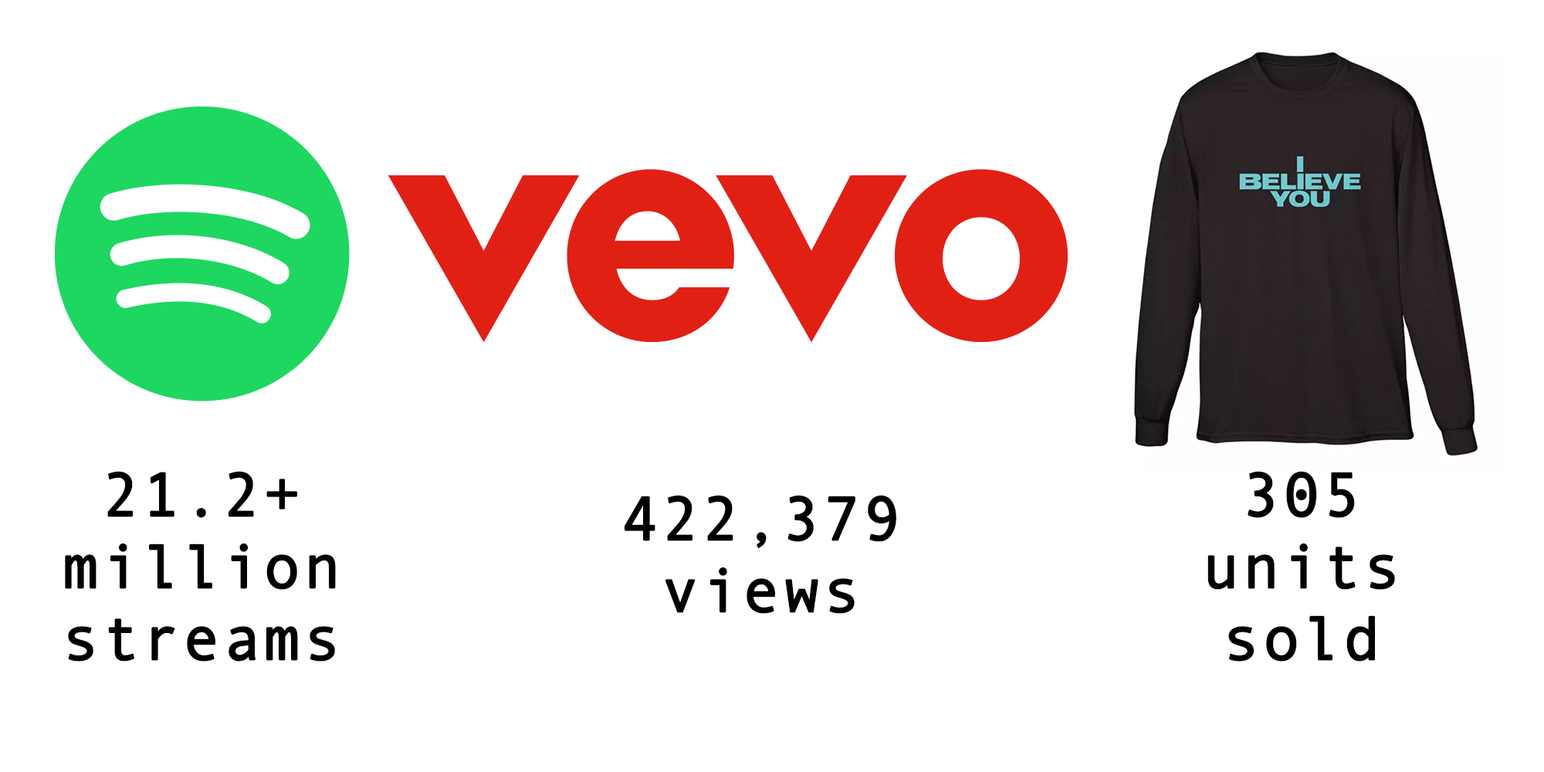
<style>
.page{position:relative;width:1544px;height:772px;background:#ffffff}
.page>*{position:absolute;margin:0}
.t1{font:61.8px/71.8px "AndaleMono";letter-spacing:0.025em;color:#000000;font-weight:bold}
</style>
<div class="page">
<p class="t1" style="left:65px;top:471px;width:271px;height:191px;text-align:center">21.2+ <br>million<br>streams</p>
<p class="t1" style="left:1208px;top:471px;width:187px;height:191px;text-align:center">305<br>units <br>sold</p>
<p class="t1" style="left:625px;top:495px;width:271px;height:119px;text-align:center">422,379<br>views</p>
</div>
